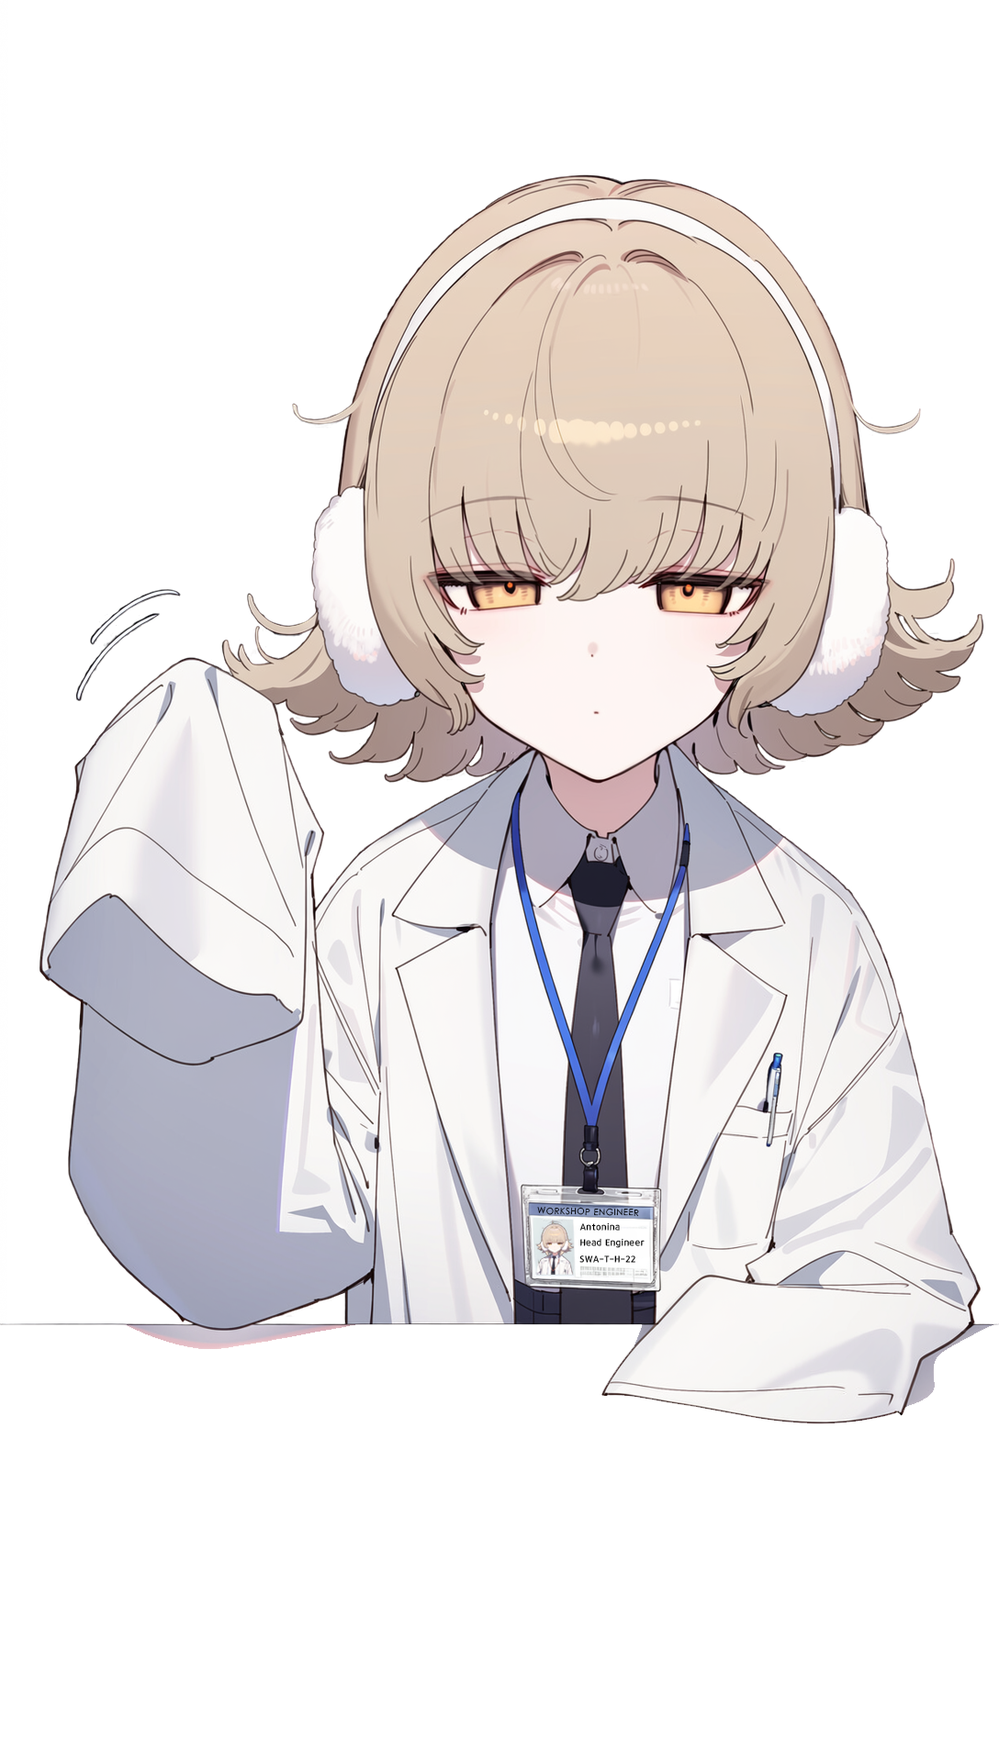
<style>
.page{position:relative;width:999px;height:1762px;background:#ffffff}
.page>*{position:absolute;margin:0}
.t1{font:8.8px "CenturyGothic";letter-spacing:0.05em;color:#000000}
.t2{font:9.2px "12LotteMartDreamBold";letter-spacing:0.05em;color:#000000}
</style>
<div class="page">
<p class="t1" style="left:537px;top:1207px;width:102px;height:10px;rotate:1deg">WORKSHOP ENGINEER</p>
<p class="t2" style="left:579px;top:1223px;width:65px;height:40px">Antonina<br>Head Engineer<br>SWA-T-H-22</p>
</div>
